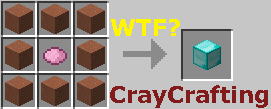
<style>
.page{position:relative;width:271px;height:109px;background:#c6c6c6}
.page>*{position:absolute;margin:0}
.t1{font:22.7px "Verdana-Bold";color:#fff600}
.t2{font:22.7px "Verdana-Bold";color:#821b1b}
</style>
<div class="page">
<p class="t1" style="left:111px;top:19px;width:69px;height:17px">WTF?</p>
<p class="t2" style="left:110px;top:85px;width:158px;height:23px">CrayCrafting</p>
</div>
